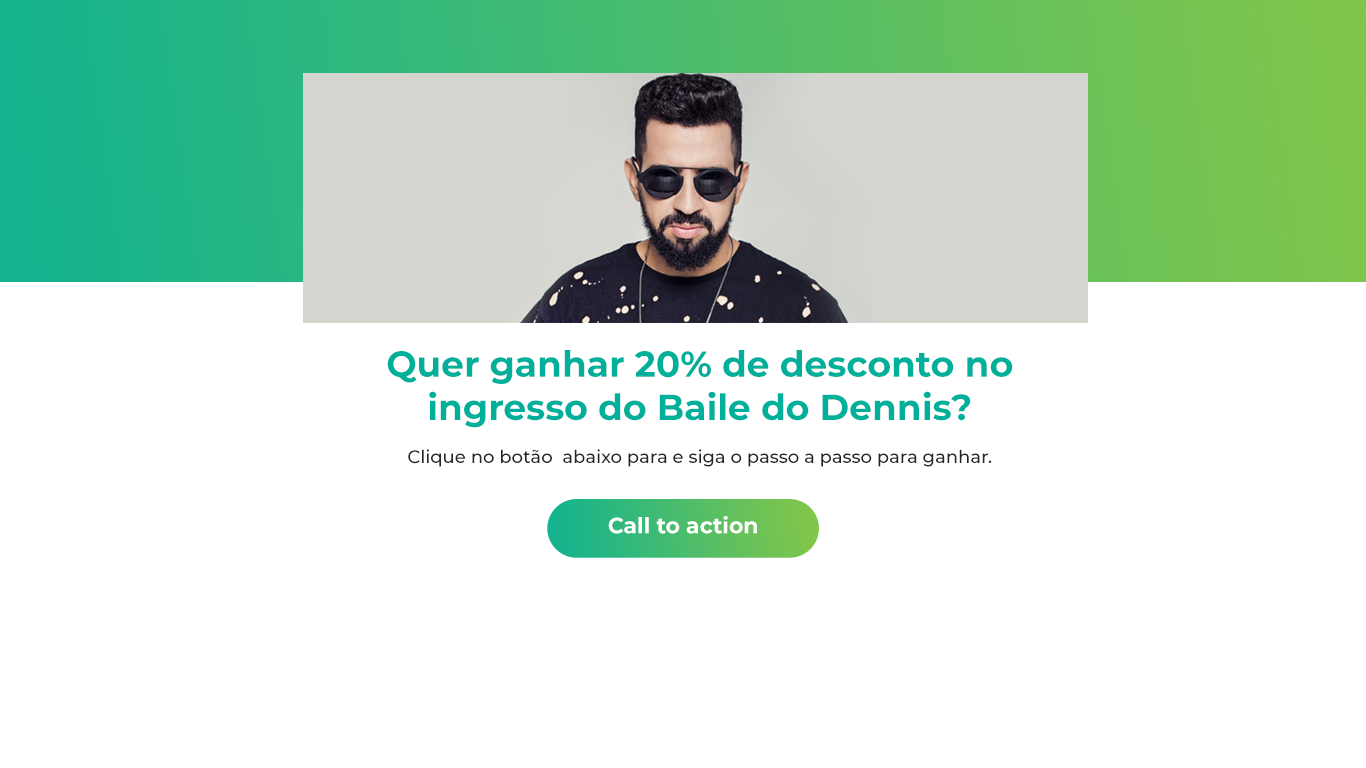
<style>
.page{position:relative;width:1366px;height:768px;background:#ffffff}
.page>*{position:absolute;margin:0}
.t1{font:36px "Montserrat-Bold";color:#00b09b}
.t2{font:18px "Montserrat-Medium";color:#242424}
.t3{font:22px "Montserrat-Bold";color:#ffffff}
</style>
<div class="page">
<p class="t1" style="left:387px;top:350px;width:626px;height:78px;text-align:center">Quer ganhar 20% de desconto no <br>ingresso do Baile do Dennis?</p>
<p class="t2" style="left:408px;top:449px;width:584px;height:18px">Clique no botão  abaixo para e siga o passo a passo para ganhar.</p>
<p class="t3" style="left:608px;top:516px;width:149px;height:18px">Call to action</p>
</div>
